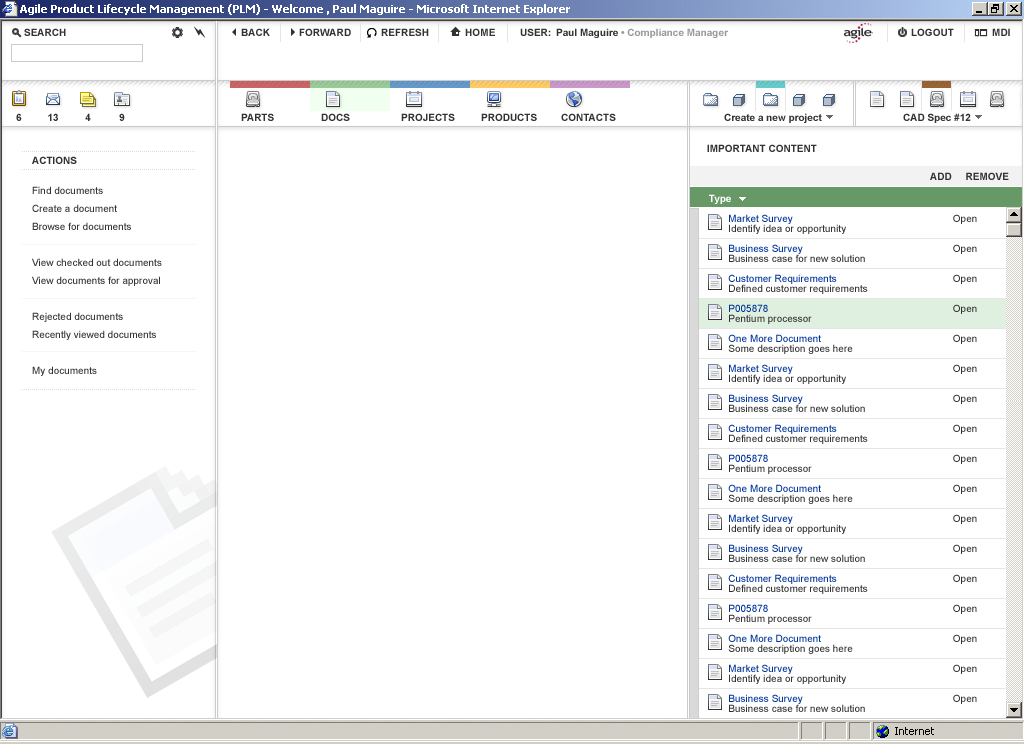
<style>
.page{position:relative;width:1024px;height:744px;background:#ffffff}
.page>*{position:absolute;margin:0}
.t1{font:10px "Arial-BoldMT";color:#333333}
.t2{font:10px "Arial-BoldMT";color:#999999}
.t3{font:10px/18px "ArialMT";color:#333333}
.t4{font:10px/10px "ArialMT";color:#333333}
.t5{font:10px "Arial-BoldMT";color:#ffffff}
.t6{font:10px/10px "ArialMT";color:#003399}
</style>
<div class="page">
<p class="t1" style="left:24px;top:28px;width:42px;height:8px">SEARCH</p>
<p class="t1" style="left:241px;top:28px;width:29px;height:8px">BACK</p>
<p class="t1" style="left:299px;top:28px;width:52px;height:8px">FORWARD</p>
<p class="t1" style="left:381px;top:28px;width:48px;height:8px">REFRESH</p>
<p class="t1" style="left:465px;top:28px;width:30px;height:8px">HOME</p>
<p class="t2" style="left:520px;top:28px;width:209px;height:10px"><span class="t1">USER: Paul Maguire </span>• Compliance Manager</p>
<p class="t1" style="left:911px;top:28px;width:43px;height:8px">LOGOUT</p>
<p class="t1" style="left:992px;top:28px;width:18px;height:8px">MDI</p>
<p class="t1" style="left:16px;top:113px;width:6px;height:8px">6</p>
<p class="t1" style="left:48px;top:113px;width:10px;height:8px">13</p>
<p class="t1" style="left:85px;top:113px;width:6px;height:8px">4</p>
<p class="t1" style="left:119px;top:113px;width:6px;height:8px">9</p>
<p class="t1" style="left:241px;top:113px;width:33px;height:8px">PARTS</p>
<p class="t1" style="left:321px;top:113px;width:29px;height:8px">DOCS</p>
<p class="t1" style="left:401px;top:113px;width:54px;height:8px">PROJECTS</p>
<p class="t1" style="left:481px;top:113px;width:56px;height:8px">PRODUCTS</p>
<p class="t1" style="left:561px;top:113px;width:55px;height:8px">CONTACTS</p>
<p class="t1" style="left:724px;top:113px;width:98px;height:10px">Create a new project</p>
<p class="t1" style="left:903px;top:113px;width:68px;height:10px">CAD Spec #12</p>
<p class="t1" style="left:707px;top:144px;width:110px;height:8px">IMPORTANT CONTENT</p>
<p class="t1" style="left:32px;top:156px;width:45px;height:8px">ACTIONS</p>
<p class="t1" style="left:930px;top:172px;width:79px;height:8px">ADD     REMOVE</p>
<p class="t3" style="left:32px;top:186px;width:130px;height:190px">Find documents<br>Create a document<br>Browse for documents<br><br>View checked out documents<br>View documents for approval<br><br>Rejected documents<br>Recently viewed documents<br><br>My documents</p>
<p class="t4" style="left:709px;top:194px;width:159px;height:518px"><span class="t5">Type<br><br></span><span class="t6">       Market Survey</span><br>       Identify idea or opportunity<br><span class="t6"><br>       Business Survey</span><br>       Business case for new solution<br><br><span class="t6">       Customer Requirements<br></span>       Defined customer requirements<br><br><span class="t6">       P005878<br></span>       Pentium processor<br><br><span class="t6">       One More Document<br></span>       Some description goes here<br><br><span class="t6">       Market Survey</span><br>       Identify idea or opportunity<br><span class="t6"><br>       Business Survey</span><br>       Business case for new solution<br><br><span class="t6">       Customer Requirements<br></span>       Defined customer requirements<br><br><span class="t6">       P005878<br></span>       Pentium processor<br><br><span class="t6">       One More Document<br></span>       Some description goes here<br><br><span class="t6">       Market Survey</span><br>       Identify idea or opportunity<br><span class="t6"><br>       Business Survey</span><br>       Business case for new solution<br><br><span class="t6">       Customer Requirements<br></span>       Defined customer requirements<br><br><span class="t6">       P005878<br></span>       Pentium processor<br><br><span class="t6">       One More Document<br></span>       Some description goes here<br><br><span class="t6">       Market Survey</span><br>       Identify idea or opportunity<br><span class="t6"><br>       Business Survey</span><br>       Business case for new solution</p>
<p class="t4" style="left:953px;top:214px;width:24px;height:490px"><span class="t5"> <br></span><br>Open<br><br><br>Open<br><br><br>Open<br><br><br>Open<br><br><br>Open<br><br><br>Open<br><br><br>Open<br><br><br>Open<br><br><br>Open<br><br><br>Open<br><br><br>Open<br><br><br>Open<br><br><br>Open<br><br><br>Open<br><br><br>Open<br><br><br>Open<br><br><br>Open</p>
</div>
